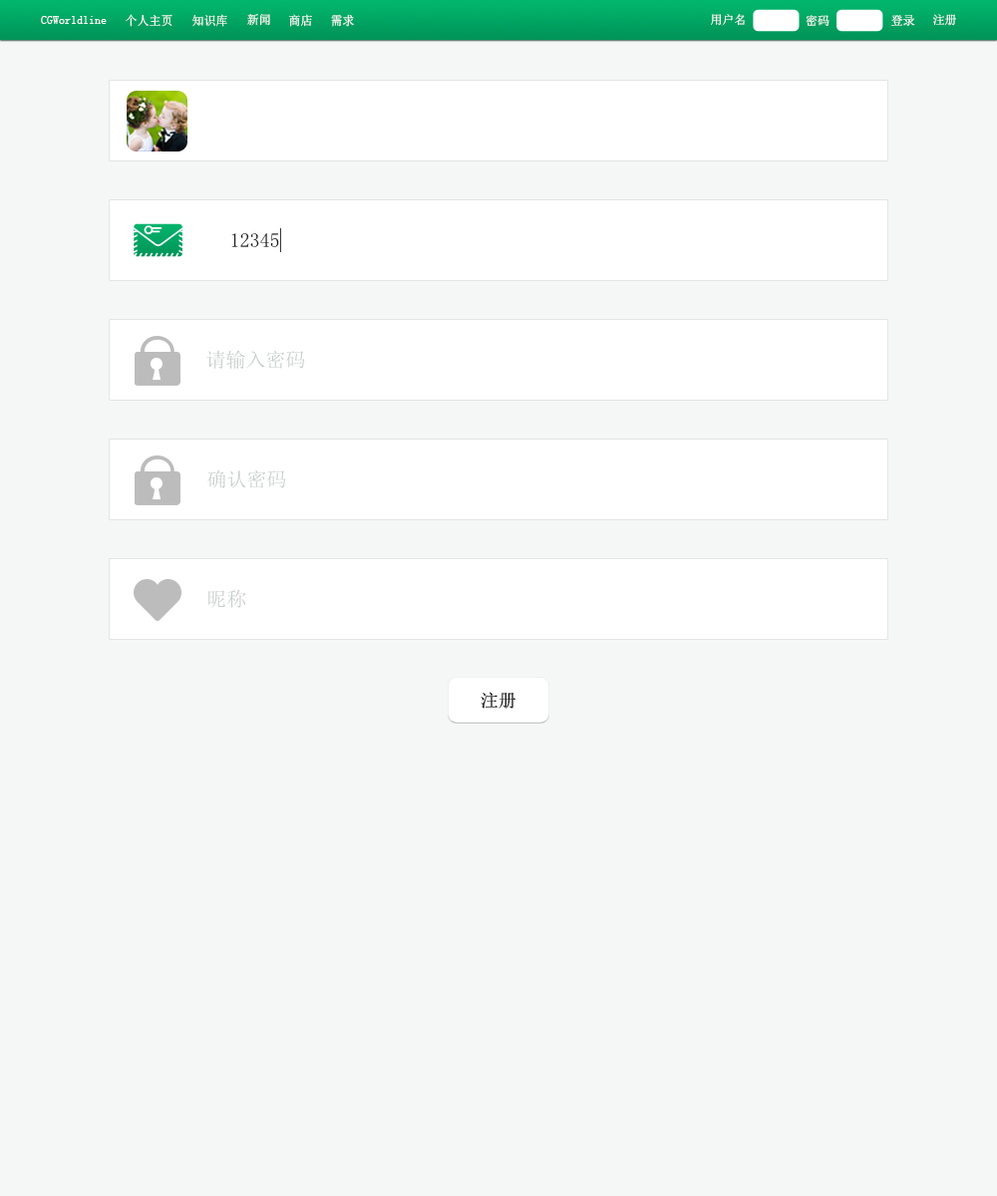
<style>
.page{position:relative;width:997px;height:1196px;background:#f5f6f6}
.page>*{position:absolute;margin:0}
.t1{font:12.4px "SimSun";color:#fdfcfc;scale:0.97 1}
.t2{font:12px "SimSun";color:#fdfcfc}
.t3{font:12px "SimSun";color:#ffffff}
.t4{font:19.9px "SimSun";color:#191919}
.t5{font:19.9px "SimSun";color:#c4ccc9}
.t6{font:17.9px "SimSun";color:#020202}
</style>
<div class="page">
<p class="t1" style="left:41px;top:16px;width:66px;height:8px">CGWorldline</p>
<p class="t1" style="left:126px;top:14px;width:46px;height:13px">个人主页</p>
<p class="t1" style="left:192px;top:14px;width:35px;height:13px">知识库</p>
<p class="t1" style="left:247px;top:13px;width:23px;height:13px">新闻</p>
<p class="t1" style="left:289px;top:14px;width:23px;height:13px">商店</p>
<p class="t1" style="left:331px;top:14px;width:23px;height:13px">需求</p>
<p class="t2" style="left:711px;top:14px;width:34px;height:12px">用户名</p>
<p class="t2" style="left:805px;top:15px;width:24px;height:11px">密码</p>
<p class="t3" style="left:891px;top:15px;width:24px;height:11px">登录</p>
<p class="t3" style="left:933px;top:14px;width:23px;height:12px">注册</p>
<p class="t4" style="left:231px;top:233px;width:48px;height:14px">12345</p>
<p class="t5" style="left:206px;top:350px;width:99px;height:19px">请输入密码</p>
<p class="t5" style="left:207px;top:470px;width:79px;height:18px">确认密码</p>
<p class="t5" style="left:208px;top:589px;width:38px;height:19px">昵称</p>
<p class="t6" style="left:480px;top:692px;width:35px;height:17px">注册</p>
</div>
